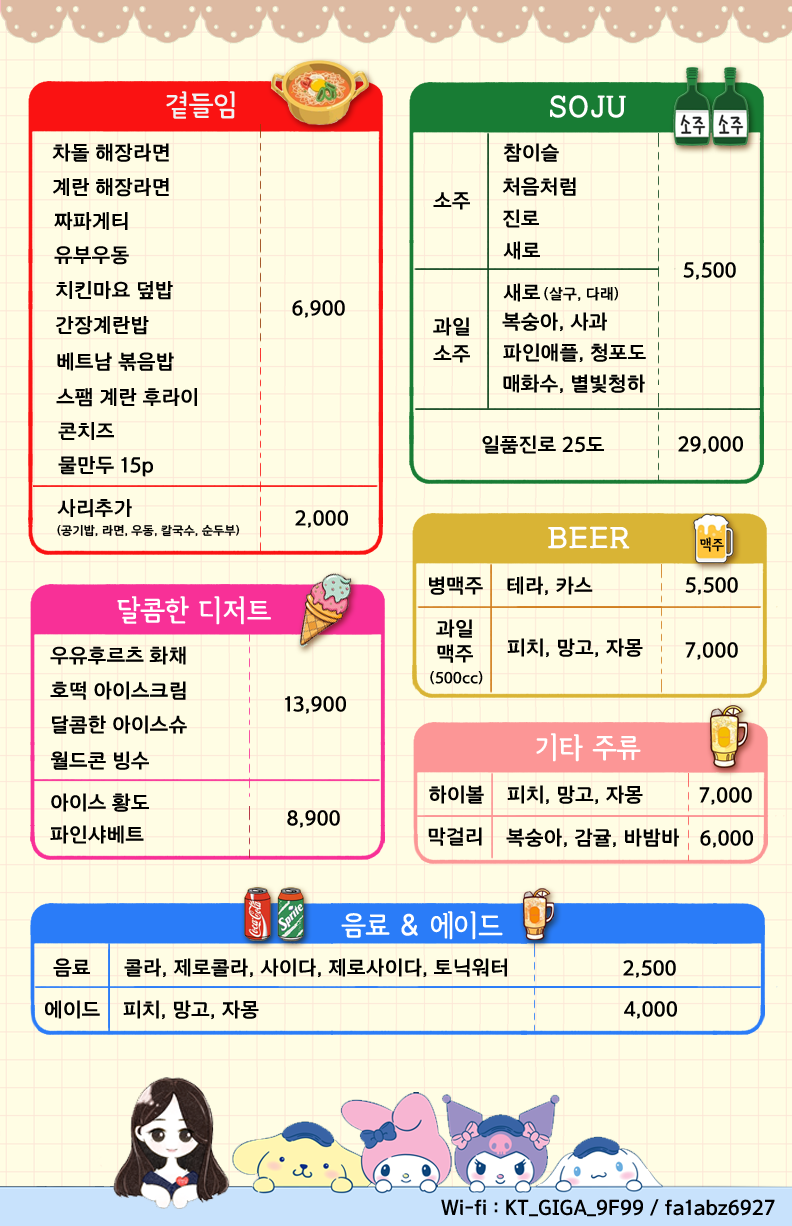
<style>
.page{position:relative;width:792px;height:1226px;background:#fffde4}
.page>*{position:absolute;margin:0}
.t1{font:30px "Pix_HeummTalnemogulim162";color:#f2f2f2}
.t2{font:30px "Pix_HeummTalnemogulim162";color:#ffffff}
.t3{font:20px "ELANDChoiceB";color:#000000}
.t4{font:15px "ELANDChoiceB";color:#000000}
.t5{font:12px "ELANDChoiceB";color:#000000}
.t6{font:15px "Pix_HeummTalnemogulim162";color:#000000}
</style>
<div class="page">
<p class="t1" style="left:166px;top:91px;width:69px;height:28px">곁들임 메뉴</p>
<p class="t2" style="left:550px;top:95px;width:76px;height:23px">SOJU</p>
<p class="t3" style="left:52px;top:143px;width:117px;height:19px">차돌 해장라면</p>
<p class="t3" style="left:503px;top:143px;width:56px;height:19px">참이슬</p>
<p class="t3" style="left:53px;top:178px;width:116px;height:19px">계란 해장라면</p>
<p class="t3" style="left:502px;top:177px;width:74px;height:19px">처음처럼</p>
<p class="t3" style="left:433px;top:192px;width:37px;height:18px">소주</p>
<p class="t3" style="left:503px;top:209px;width:36px;height:19px">진로</p>
<p class="t3" style="left:54px;top:212px;width:74px;height:18px">짜파게티</p>
<p class="t3" style="left:54px;top:246px;width:75px;height:19px">유부우동</p>
<p class="t3" style="left:503px;top:241px;width:37px;height:19px">새로</p>
<p class="t3" style="left:683px;top:262px;width:53px;height:18px">5,500</p>
<p class="t3" style="left:55px;top:281px;width:118px;height:19px">치킨마요 덮밥</p>
<p class="t3" style="left:503px;top:283px;width:37px;height:19px">새로</p>
<p class="t4" style="left:544px;top:287px;width:74px;height:14px">(살구, 다래)</p>
<p class="t3" style="left:292px;top:300px;width:53px;height:18px">6,900</p>
<p class="t3" style="left:55px;top:316px;width:94px;height:19px">간장계란밥</p>
<p class="t3" style="left:433px;top:317px;width:36px;height:19px">과일</p>
<p class="t3" style="left:502px;top:312px;width:105px;height:20px">복숭아, 사과</p>
<p class="t3" style="left:57px;top:352px;width:117px;height:19px">베트남 볶음밥</p>
<p class="t3" style="left:433px;top:345px;width:37px;height:18px">소주</p>
<p class="t3" style="left:503px;top:343px;width:143px;height:20px">파인애플, 청포도</p>
<p class="t3" style="left:503px;top:374px;width:142px;height:20px">매화수, 별빛청하</p>
<p class="t3" style="left:56px;top:388px;width:141px;height:19px">스팸 계란 후라이</p>
<p class="t3" style="left:58px;top:422px;width:56px;height:18px">콘치즈</p>
<p class="t3" style="left:482px;top:435px;width:122px;height:19px">일품진로 25도</p>
<p class="t3" style="left:678px;top:436px;width:65px;height:18px">29,000</p>
<p class="t3" style="left:58px;top:456px;width:95px;height:21px">물만두 15p</p>
<p class="t3" style="left:57px;top:499px;width:75px;height:18px">사리추가</p>
<p class="t3" style="left:295px;top:510px;width:53px;height:18px">2,000</p>
<p class="t5" style="left:57px;top:524px;width:183px;height:13px">(공기밥, 라면, 우동, 칼국수, 순두부)</p>
<p class="t2" style="left:548px;top:526px;width:82px;height:23px">BEER</p>
<p class="t6" style="left:700px;top:537px;width:24px;height:15px">맥주</p>
<p class="t3" style="left:429px;top:576px;width:54px;height:19px">병맥주</p>
<p class="t3" style="left:507px;top:576px;width:86px;height:20px">테라, 카스</p>
<p class="t3" style="left:685px;top:577px;width:53px;height:18px">5,500</p>
<p class="t2" style="left:117px;top:596px;width:154px;height:29px">달콤한 디저트</p>
<p class="t3" style="left:436px;top:619px;width:36px;height:19px">과일</p>
<p class="t3" style="left:507px;top:638px;width:136px;height:20px">피치, 망고, 자몽</p>
<p class="t3" style="left:50px;top:646px;width:136px;height:19px">우유후르츠 화채</p>
<p class="t3" style="left:437px;top:644px;width:36px;height:19px">맥주</p>
<p class="t3" style="left:685px;top:642px;width:53px;height:18px">7,000</p>
<p class="t4" style="left:430px;top:671px;width:53px;height:14px">(500cc)</p>
<p class="t3" style="left:50px;top:681px;width:136px;height:19px">호떡 아이스크림</p>
<p class="t3" style="left:285px;top:696px;width:61px;height:18px">13,900</p>
<p class="t3" style="left:52px;top:715px;width:135px;height:19px">달콤한 아이스슈</p>
<p class="t2" style="left:536px;top:733px;width:105px;height:29px">기타 주류</p>
<p class="t3" style="left:51px;top:751px;width:98px;height:19px">월드콘 빙수</p>
<p class="t3" style="left:429px;top:785px;width:55px;height:19px">하이볼</p>
<p class="t3" style="left:507px;top:785px;width:136px;height:20px">피치, 망고, 자몽</p>
<p class="t3" style="left:51px;top:793px;width:98px;height:19px">아이스 황도</p>
<p class="t3" style="left:699px;top:787px;width:53px;height:18px">7,000</p>
<p class="t3" style="left:287px;top:810px;width:53px;height:18px">8,900</p>
<p class="t3" style="left:50px;top:825px;width:94px;height:19px">파인샤베트</p>
<p class="t3" style="left:428px;top:827px;width:54px;height:19px">막걸리</p>
<p class="t3" style="left:506px;top:828px;width:173px;height:20px">복숭아, 감귤, 바밤바</p>
<p class="t3" style="left:700px;top:830px;width:53px;height:18px">6,000</p>
<p class="t2" style="left:341px;top:911px;width:162px;height:29px">음료 &amp; 에이드</p>
<p class="t3" style="left:53px;top:958px;width:37px;height:19px">음료</p>
<p class="t3" style="left:124px;top:958px;width:383px;height:20px">콜라, 제로콜라, 사이다, 제로사이다, 토닉워터</p>
<p class="t3" style="left:623px;top:960px;width:53px;height:18px">2,500</p>
<p class="t3" style="left:45px;top:1000px;width:55px;height:19px">에이드</p>
<p class="t3" style="left:123px;top:1000px;width:136px;height:20px">피치, 망고, 자몽</p>
<p class="t3" style="left:624px;top:1001px;width:53px;height:18px">4,000</p>
<p class="t3" style="left:441px;top:1199px;width:334px;height:18px">Wi-fi : KT_GIGA_9F99 / fa1abz6927</p>
</div>
